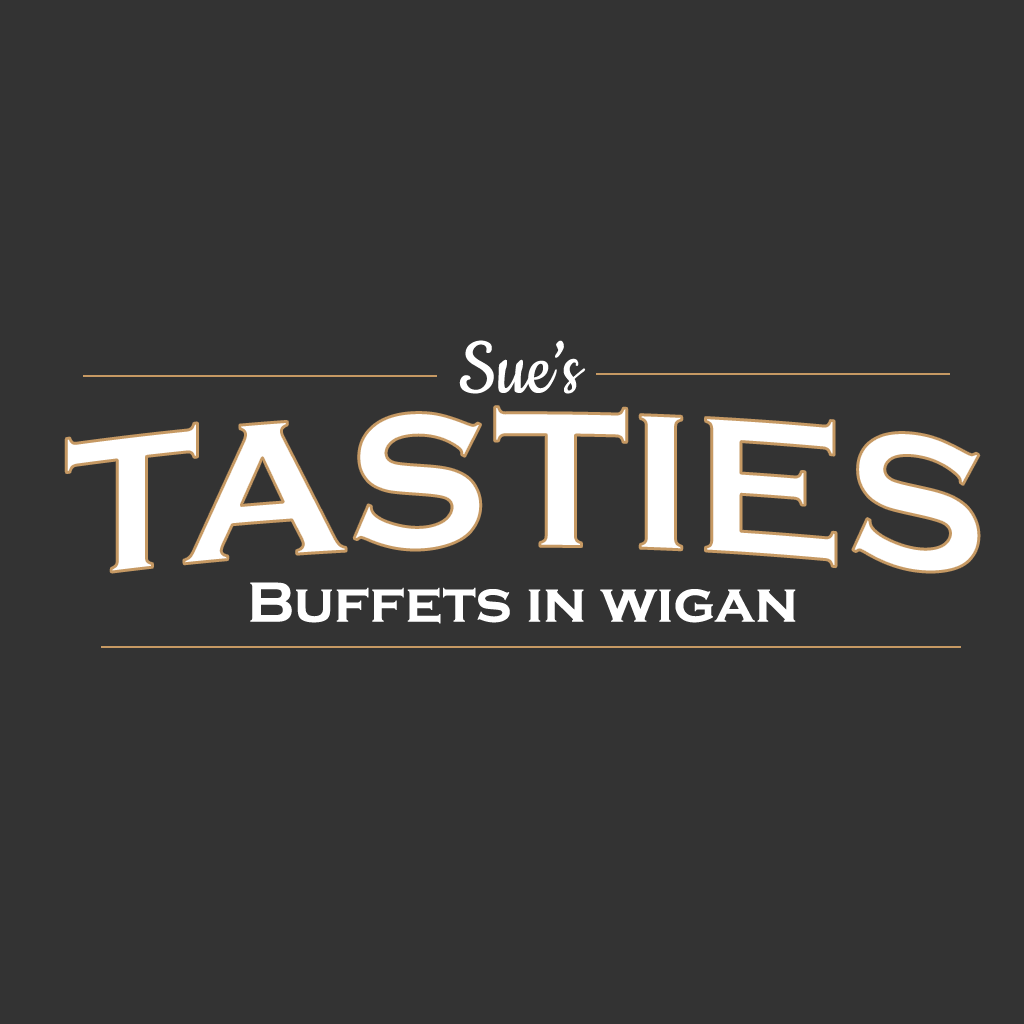
<style>
.page{position:relative;width:1024px;height:1024px;background:#333333}
.page>*{position:absolute;margin:0}
.t1{font:89.1px "Cookie-Regular";color:#ffffff;scale:0.92 1}
.t2{font:199.6px "CopperplateGothic-Bold";color:#ffffff}
.t3{font:58.3px "CopperplateGothic-Bold";color:#ffffff}
</style>
<div class="page">
<p class="t1" style="left:459px;top:340px;width:127px;height:54px">Sue’s</p>
<p class="t2" style="left:66px;top:406px;width:913px;height:166px">TASTIES</p>
<p class="t3" style="left:250px;top:582px;width:546px;height:42px">Buffets in wigan</p>
</div>
